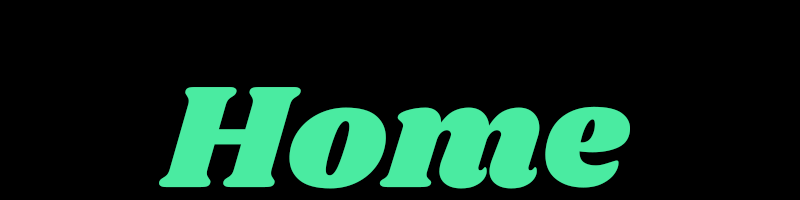
<style>
.page{position:relative;width:800px;height:200px;background:#000000}
.page>*{position:absolute;margin:0}
.t1{font:150px "Shrikhand-Regular";color:#4aeba1}
</style>
<div class="page">
<p class="t1" style="left:159px;top:87px;width:471px;height:102px">Home</p>
</div>
